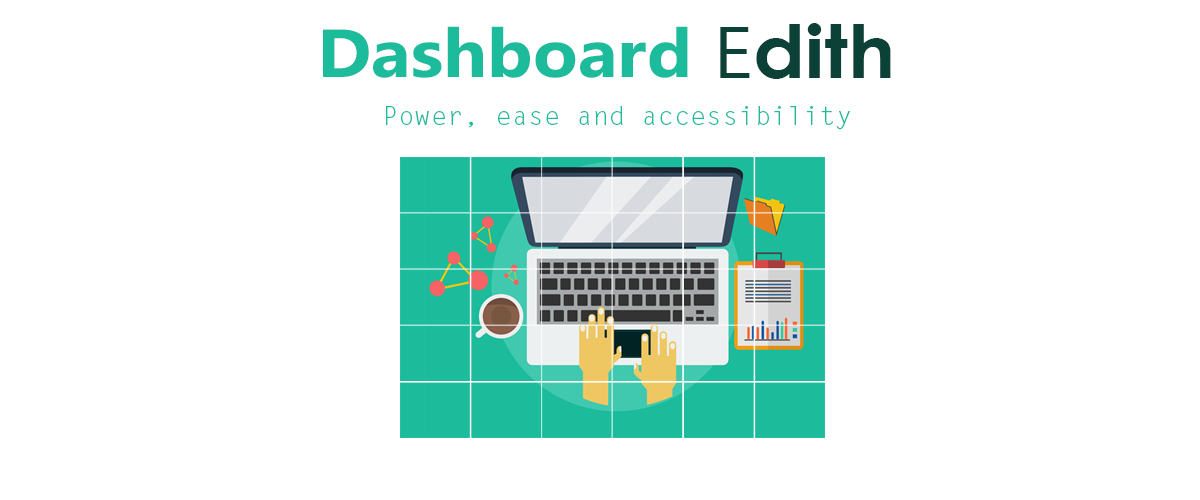
<style>
.page{position:relative;width:1200px;height:500px;background:#ffffff}
.page>*{position:absolute;margin:0}
.t1{font:68px "Ebrima-Bold";color:#1cbb9b;scale:1.08 1}
.t2{font:73px "CenturyGothic-Bold";color:#0b4136;scale:1.08 1}
.t3{font:73px "MicrosoftNewTaiLue";color:#0b4136;scale:1.08 1}
.t4{font:25px "LetterGothicStd";color:#1cbb9b;scale:1.08 1}
</style>
<div class="page">
<p class="t1" style="left:323px;top:26px;width:365px;height:52px">Dashboard</p>
<p class="t2" style="left:720px;top:23px;width:171px;height:56px"><span class="t3">E</span>dith</p>
<p class="t4" style="left:386px;top:106px;width:464px;height:24px">Power, ease and accessibility</p>
</div>
